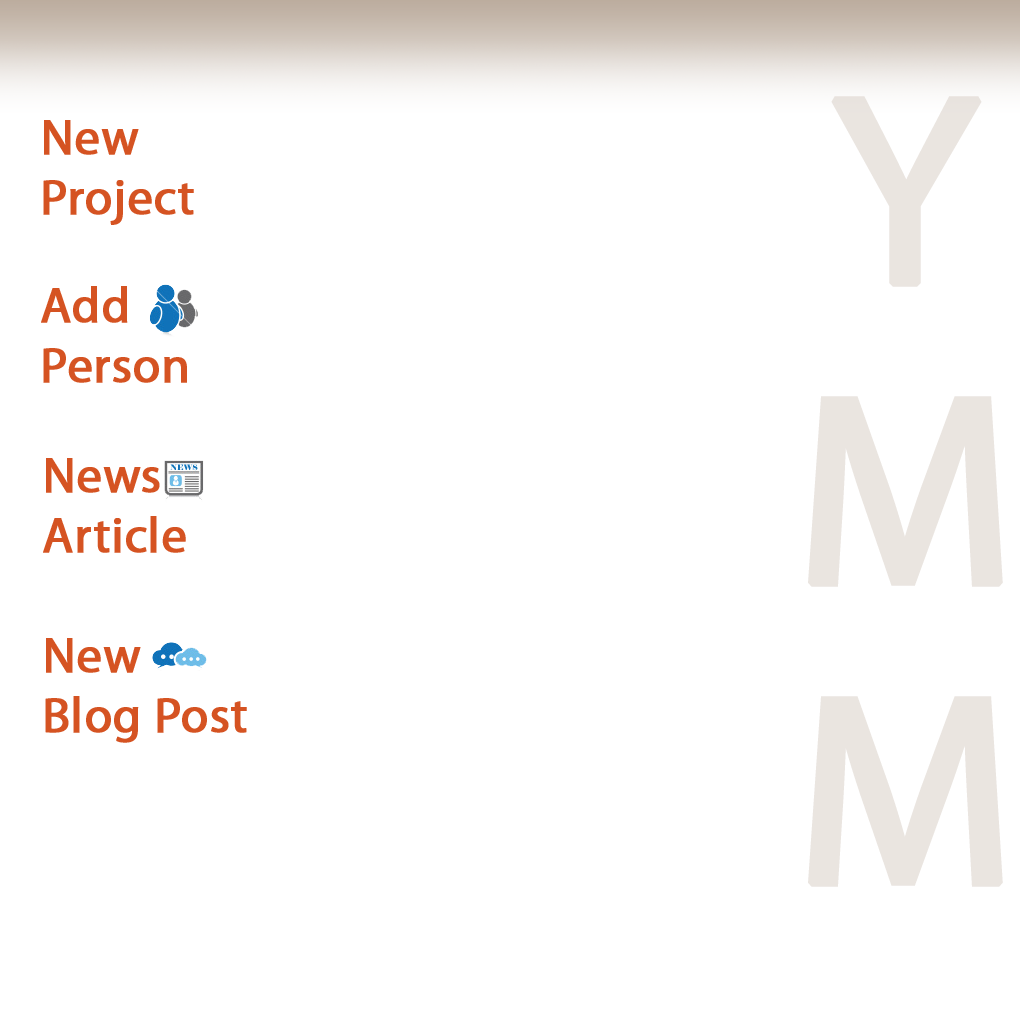
<style>
.page{position:relative;width:1020px;height:1020px;background:#ffffff}
.page>*{position:absolute;margin:0}
.t1{font:272px/300px "MyriadPro-Regular";color:#eae5e0;font-weight:bold}
.t2{font:50px/60px "MyriadPro-Regular";color:#d55322;font-weight:bold}
</style>
<div class="page">
<p class="t1" style="left:808px;top:96px;width:195px;height:791px;text-align:center">Y<br>M<br>M</p>
<p class="t2" style="left:43px;top:120px;width:151px;height:105px">New Project</p>
<p class="t2" style="left:41px;top:286px;width:146px;height:97px">Add Person</p>
<p class="t2" style="left:43px;top:458px;width:143px;height:95px">News<br>Article</p>
<p class="t2" style="left:45px;top:638px;width:202px;height:105px">New <br>Blog Post</p>
</div>
